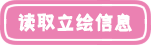
<style>
.page{position:relative;width:151px;height:45px;background:#eb81b2}
.page>*{position:absolute;margin:0}
.t1{font:12px "shetumodengxiaofangti";color:#ffffff;font-weight:bold;scale:0.94 1}
</style>
<div class="page">
<p class="t1" style="left:18px;top:13px;width:114px;height:19px">读取立绘信息</p>
</div>
